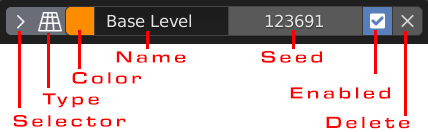
<style>
.page{position:relative;width:428px;height:132px;background:#ffffff}
.page>*{position:absolute;margin:0}
.t1{font:20px "ArianLT-Bold";letter-spacing:0.18em;color:#ff0000}
</style>
<div class="page">
<p class="t1" style="left:116px;top:51px;width:70px;height:12px">Name</p>
<p class="t1" style="left:261px;top:51px;width:61px;height:12px">Seed</p>
<p class="t1" style="left:72px;top:72px;width:69px;height:12px">Color</p>
<p class="t1" style="left:290px;top:87px;width:100px;height:12px">Enabled</p>
<p class="t1" style="left:42px;top:93px;width:57px;height:15px">Type</p>
<p class="t1" style="left:13px;top:115px;width:113px;height:12px">Selector</p>
<p class="t1" style="left:326px;top:116px;width:84px;height:13px">Delete</p>
</div>
